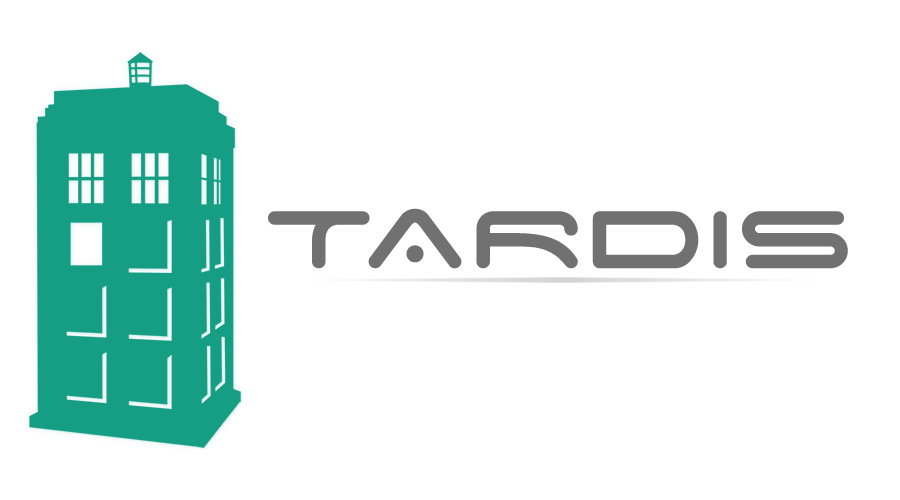
<style>
.page{position:relative;width:900px;height:500px;background:#ffffff}
.page>*{position:absolute;margin:0}
.t1{font:128px "SpaceAge";color:#717171;font-weight:bold}
</style>
<div class="page">
<p class="t1" style="left:268px;top:208px;width:580px;height:61px">TARDIS</p>
</div>
